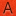
<style>
.page{position:relative;width:16px;height:16px}
.page>*{position:absolute;margin:0}
.t1{font:16px "Helvetica";color:#570f00}
</style>
<div class="page">
<p class="t1" style="left:3px;top:2px;width:10px;height:12px">A</p>
</div>
